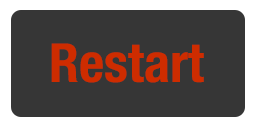
<style>
.page{position:relative;width:256px;height:128px;background:#363636}
.page>*{position:absolute;margin:0}
.t1{font:54px "HelveticaNeue-CondensedBold";color:#cd2b00}
</style>
<div class="page">
<p class="t1" style="left:51px;top:43px;width:153px;height:40px">Restart</p>
</div>
